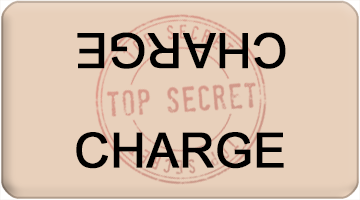
<style>
.page{position:relative;width:360px;height:200px;background:#e8d0bb}
.page>*{position:absolute;margin:0}
.t1{font:48px "ArialMT";color:#000000;font-weight:bold}
</style>
<div class="page">
<p class="t1" style="left:77px;top:32px;width:209px;height:37px;rotate:180deg">CHARGE</p>
<p class="t1" style="left:76px;top:132px;width:208px;height:37px">CHARGE</p>
</div>
